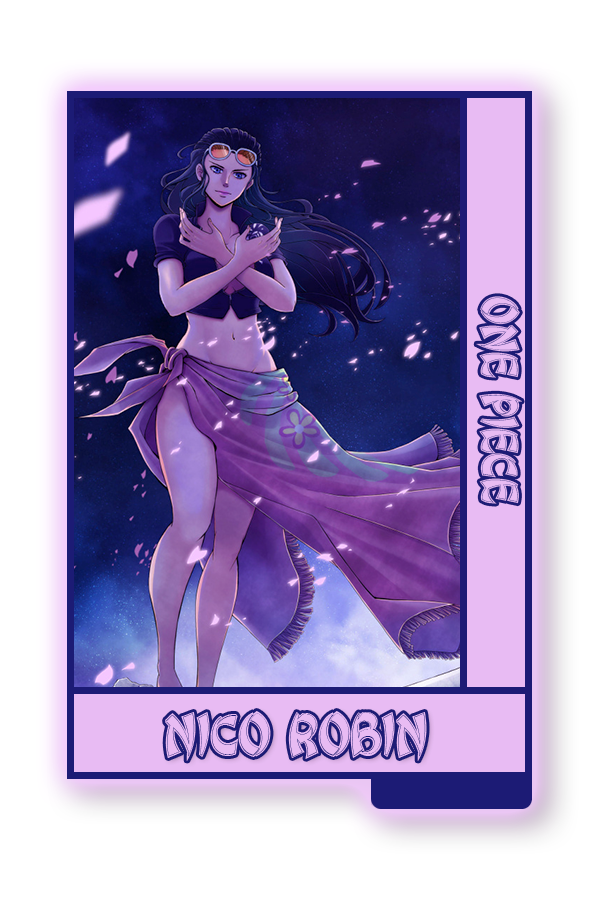
<style>
.page{position:relative;width:600px;height:900px;background:#ffffff}
.page>*{position:absolute;margin:0}
.t1{font:58.3px "ChineseDragon-Regular";color:#e8c5f1}
.t2{font:66.7px "ChineseDragon-Regular";color:#e8c5f1}
</style>
<div class="page">
<p class="t1" style="left:476px;top:296px;width:46px;height:208px;rotate:90deg">ONE PIECE</p>
<p class="t2" style="left:165px;top:711px;width:262px;height:50px">NICO ROBIN</p>
</div>
